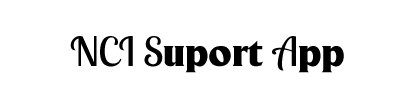
<style>
.page{position:relative;width:407px;height:97px;background:#ffffff}
.page>*{position:absolute;margin:0}
.t1{font:40px "LobsterTwo";color:#000000}
.t2{font:40px "Adelon-Serial-Heavy-Regular";color:#000000}
</style>
<div class="page">
<p class="t1" style="left:70px;top:36px;width:274px;height:37px">NCI S<span class="t2">uport </span>A<span class="t2">pp</span></p>
</div>
